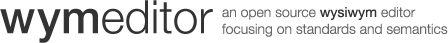
<style>
.page{position:relative;width:448px;height:43px;background:#ffffff}
.page>*{position:absolute;margin:0}
.t1{font:14px "HelveticaNeue-Light";color:#666666}
.t2{font:14px "HelveticaNeue";color:#333333}
</style>
<div class="page">
<p class="t1" style="left:222px;top:7px;width:226px;height:30px">an open source <span class="t2">wysiwym </span>editor<br>focusing on standards and semantics</p>
</div>
